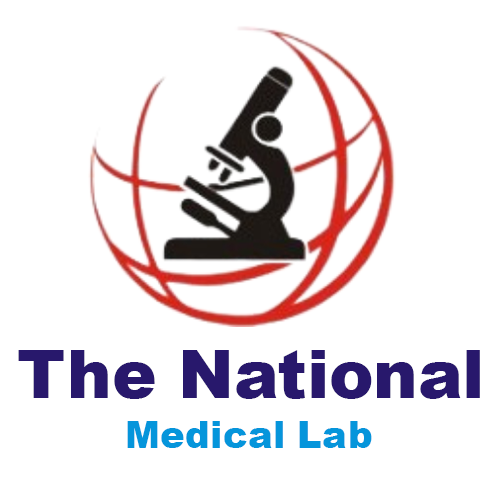
<style>
.page{position:relative;width:502px;height:502px;background:#ffffff}
.page>*{position:absolute;margin:0}
.t1{font:66.7px "Arial-Black";color:#28186c}
.t2{font:37.3px "Arial-Black";color:#0595db}
</style>
<div class="page">
<p class="t1" style="left:18px;top:350px;width:462px;height:49px">The National</p>
<p class="t2" style="left:127px;top:421px;width:245px;height:27px">Medical Lab</p>
</div>
